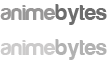
<style>
.page{position:relative;width:107px;height:60px;background:#ffffff}
.page>*{position:absolute;margin:0}
.t1{font:23px "Harabara";color:#989797}
.t2{font:23px "Harabara";color:#6d6d6d}
.t3{font:23px "Harabara";color:#cccbcb}
.t4{font:23px "Harabara";color:#b2b2b2}
</style>
<div class="page">
<p class="t1" style="left:0px;top:4px;width:107px;height:21px">anime<span class="t2">bytes</span></p>
<p class="t3" style="left:0px;top:39px;width:107px;height:21px">anime<span class="t4">bytes</span></p>
</div>
